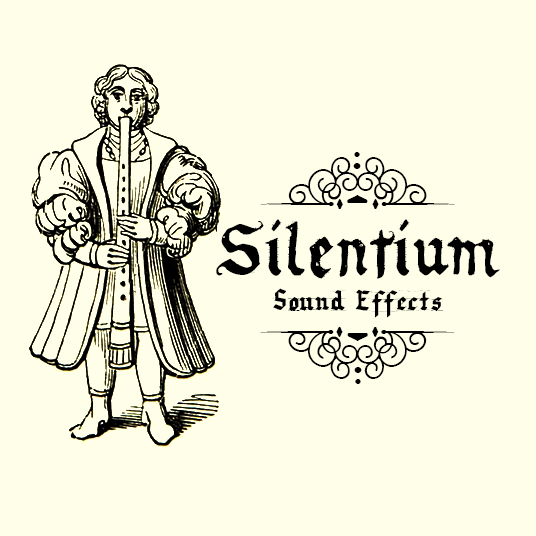
<style>
.page{position:relative;width:536px;height:536px;background:#ffffe9}
.page>*{position:absolute;margin:0}
.t1{font:75px "BergamotOrnaments";letter-spacing:0.025em;color:#000000}
.t2{font:75px "RequiemforA";letter-spacing:0.025em;color:#000000}
.t3{font:33.3px "VeryChristmess";letter-spacing:0.01em;color:#000000}
</style>
<div class="page">
<p class="t1" style="left:260px;top:152px;width:195px;height:57px;rotate:180deg">n</p>
<p class="t2" style="left:216px;top:219px;width:284px;height:60px">Silentium</p>
<p class="t3" style="left:272px;top:288px;width:172px;height:30px">Sound Effects</p>
<p class="t1" style="left:260px;top:327px;width:195px;height:57px">n</p>
</div>
